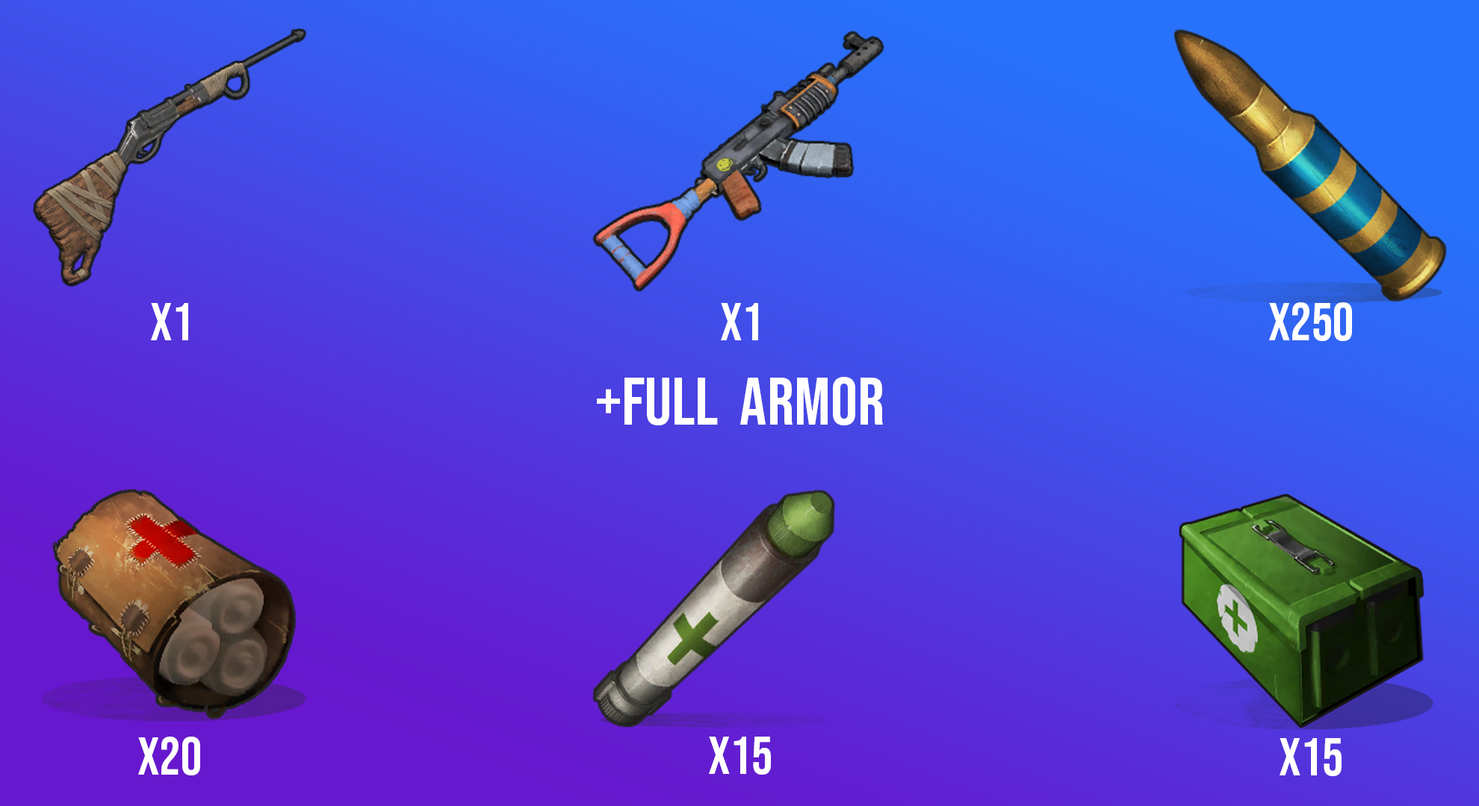
<style>
.page{position:relative;width:1479px;height:806px}
.page>*{position:absolute;margin:0}
.t1{font:53.5px "BebasNeue-Regular";color:#ffffff}
.t2{font:67.6px "BebasNeue-Regular";color:#ffffff}
</style>
<div class="page">
<p class="t1" style="left:151px;top:303px;width:37px;height:38px">x1</p>
<p class="t1" style="left:721px;top:303px;width:37px;height:38px">x1</p>
<p class="t1" style="left:1269px;top:302px;width:83px;height:39px">x250</p>
<p class="t2" style="left:597px;top:377px;width:286px;height:49px">+FULL  armor</p>
<p class="t1" style="left:138px;top:737px;width:62px;height:39px">x20</p>
<p class="t1" style="left:709px;top:737px;width:62px;height:38px">x15</p>
<p class="t1" style="left:1279px;top:739px;width:62px;height:38px">x15</p>
</div>
